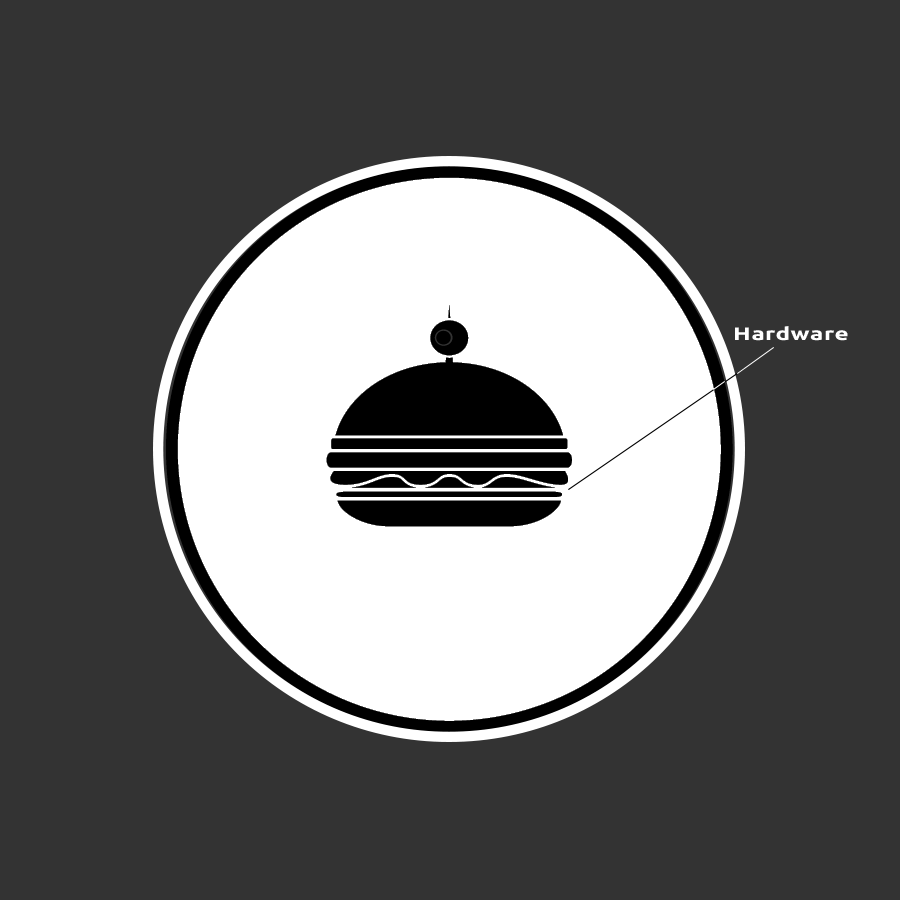
<style>
.page{position:relative;width:900px;height:900px;background:#333333}
.page>*{position:absolute;margin:0}
.t1{font:18px "Ubuntu-Bold";letter-spacing:0.02em;color:#ffffff;scale:1.35 1}
</style>
<div class="page">
<p class="t1" style="left:735px;top:326px;width:113px;height:15px">Hardware</p>
</div>
